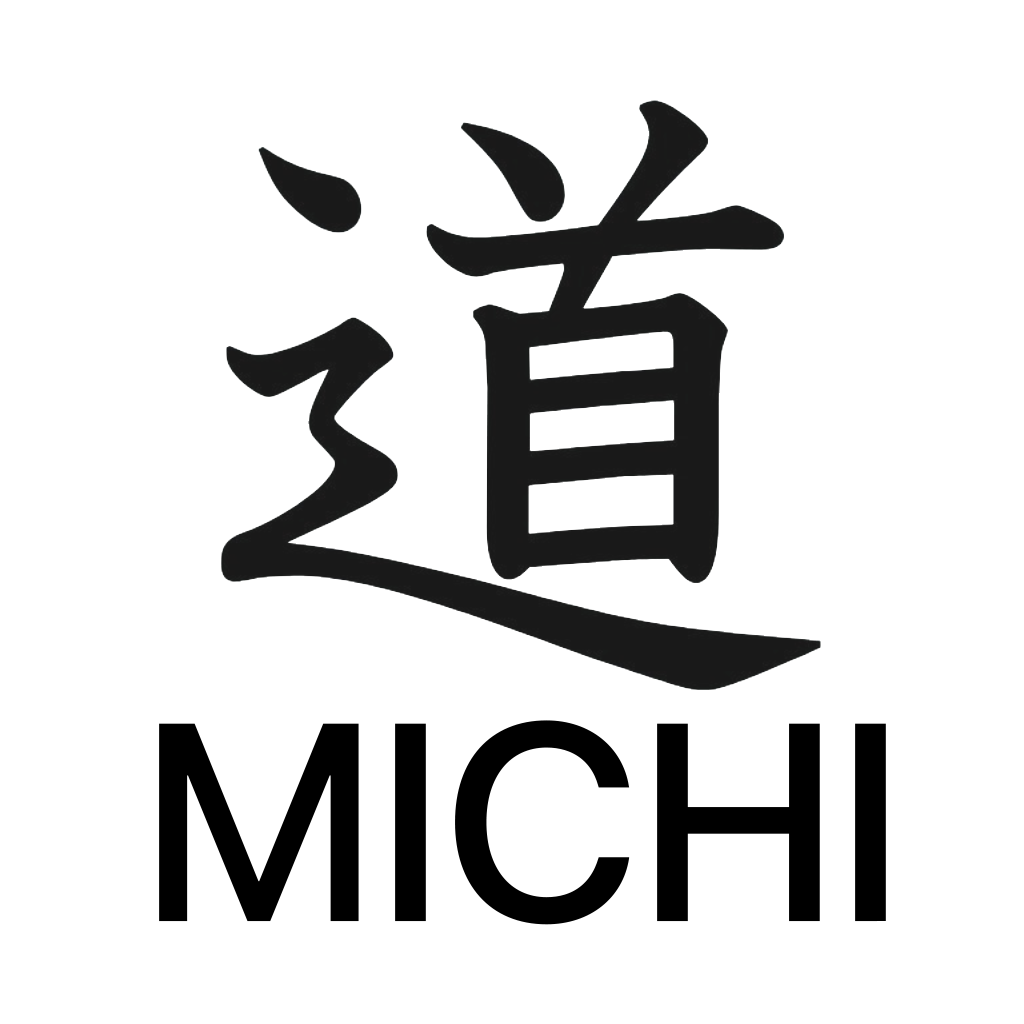
<style>
.page{position:relative;width:1024px;height:1024px;background:#ffffff}
.page>*{position:absolute;margin:0}
.t1{font:280px "SFProDisplay-Medium";color:#000000}
</style>
<div class="page">
<p class="t1" style="left:159px;top:720px;width:727px;height:205px">MICHI</p>
</div>
